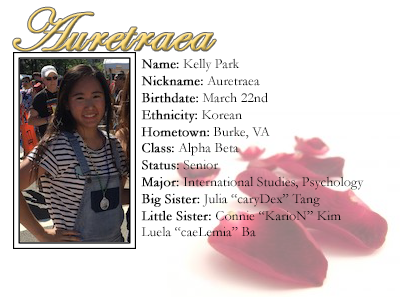
<style>
.page{position:relative;width:400px;height:300px;background:#ffffff}
.page>*{position:absolute;margin:0}
.t1{font:60px "EdwardianScriptITC";font-weight:bold}
.t2{font:14px "Garamond";color:#000000}
.t3{font:14px "Garamond";color:#000000;font-weight:bold}
</style>
<div class="page">
<p class="t1" style="left:13px;top:7px;width:203px;height:44px">Auretraea</p>
<p class="t2" style="left:141px;top:58px;width:223px;height:179px"><span class="t3">Name:</span> Kelly Park<br><span class="t3">Nickname:</span> Auretraea<br><span class="t3">Birthdate:</span> March 22nd<br><span class="t3">Ethnicity:</span> Korean<br><span class="t3">Hometown:</span> Burke, VA<br><span class="t3">Class:</span> Alpha Beta<br><span class="t3">Status:</span> Senior<br><span class="t3">Major:</span> International Studies, Psychology<br><span class="t3">Big Sister: </span>Julia “caryDex” Tang<br><span class="t3">Little Sister: </span>Connie “KarioN” Kim<br>Luela “caeLemia” Ba</p>
</div>
